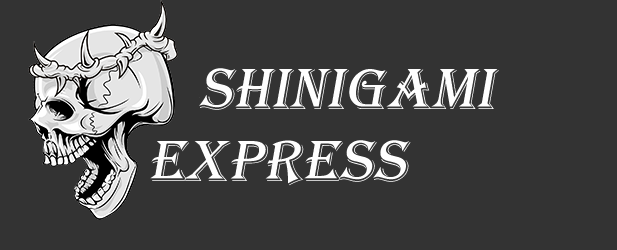
<style>
.page{position:relative;width:617px;height:250px;background:#333333}
.page>*{position:absolute;margin:0}
.t1{font:60px "Algerian";letter-spacing:0.005em;color:#fefefe;font-style:italic}
</style>
<div class="page">
<p class="t1" style="left:150px;top:68px;width:349px;height:118px">Shinigami<br>Express</p>
</div>
